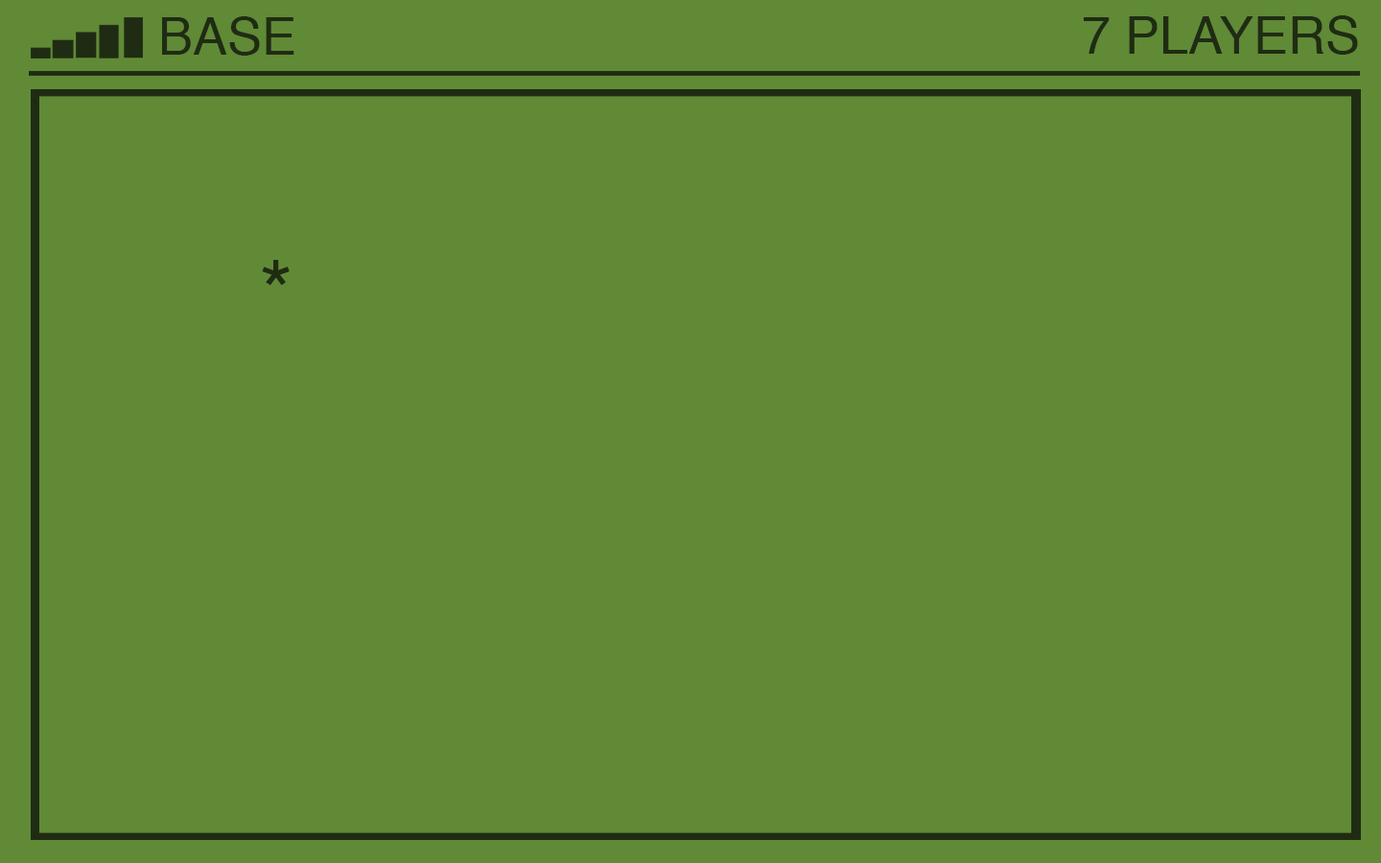
<style>
.page{position:relative;width:1381px;height:863px;background:#608a36}
.page>*{position:absolute;margin:0}
.t1{font:51.8px "Helvetica";color:#1f2c13}
.t2{font:88.2px "Helvetica";color:#1f2c13}
</style>
<div class="page">
<p class="t1" style="left:162px;top:16px;width:132px;height:40px">BASE</p>
<p class="t1" style="left:1084px;top:15px;width:274px;height:40px">7 PLAYERS</p>
<p class="t2" style="left:262px;top:260px;width:28px;height:26px">*</p>
</div>
